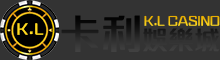
<style>
.page{position:relative;width:220px;height:60px;background:#333333}
.page>*{position:absolute;margin:0}
.t1{font:26px "»X¯Ç¬Õ´IÊ^";color:#262626}
.t2{font:41.6px "»X¯Ç¬Õ´IÊ^";color:#262626}
.t3{font:13.2px "»X¯Ç¬Õ´IÊ^";color:#f0bf0c}
.t4{font:15.5px "»X¯Ç¬Õ´IÊ^";letter-spacing:0.075em;color:#ffda21}
</style>
<div class="page">
<p class="t1" style="left:61px;top:15px;width:159px;height:37px"><span class="t2">卡利</span>娛樂城</p>
<p class="t3" style="left:144px;top:15px;width:76px;height:11px">K.L CASINO</p>
<p class="t4" style="left:17px;top:23px;width:27px;height:12px">K.L</p>
</div>
